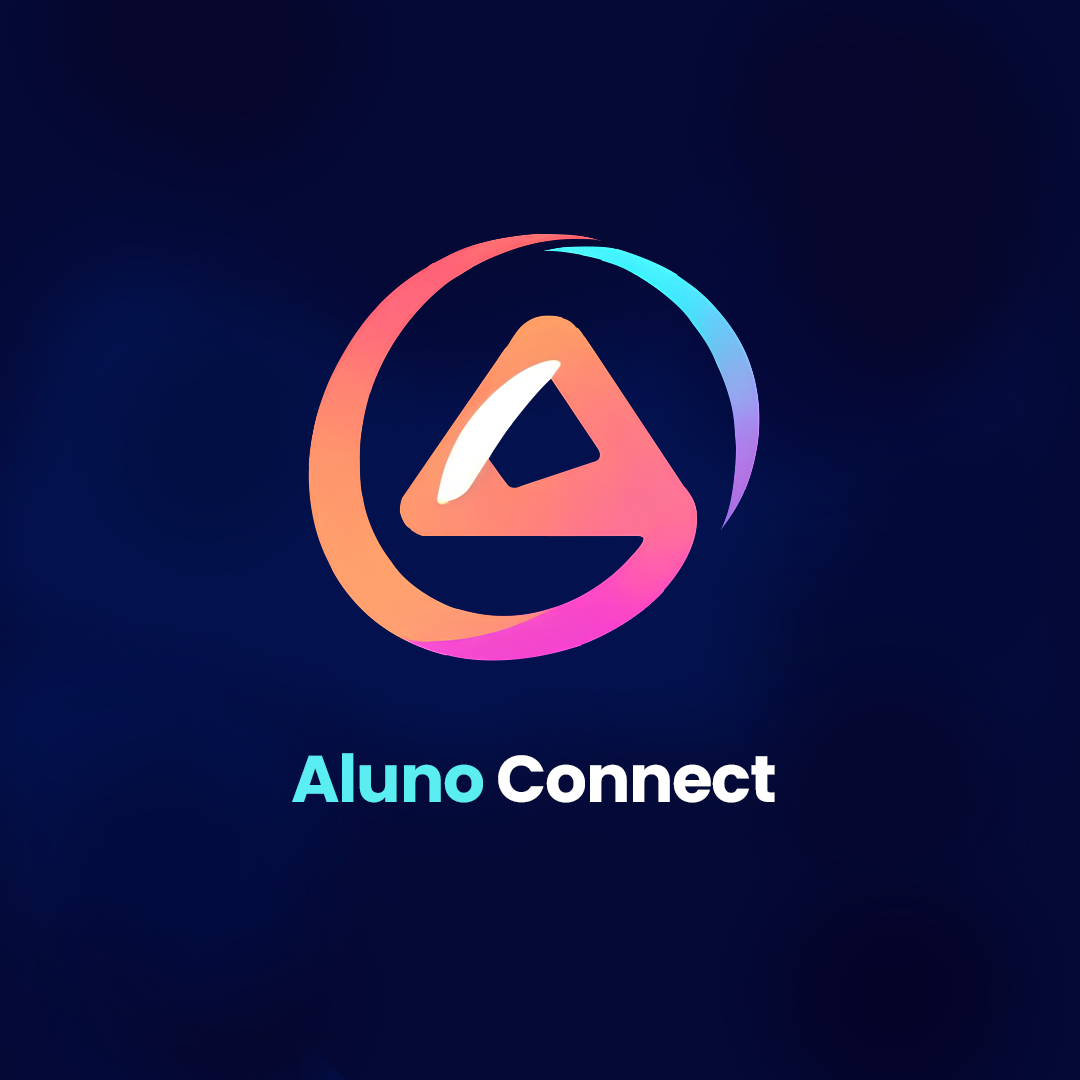
<style>
.page{position:relative;width:1080px;height:1080px}
.page>*{position:absolute;margin:0}
.t1{font:66px "Poppins-Bold";letter-spacing:-0.02em;color:#ffffff}
.t2{font:66px "Poppins-Bold";letter-spacing:-0.02em;color:#5aedf2}
</style>
<div class="page">
<p class="t1" style="left:292px;top:753px;width:483px;height:50px"><span class="t2">Aluno </span>Connect</p>
</div>
